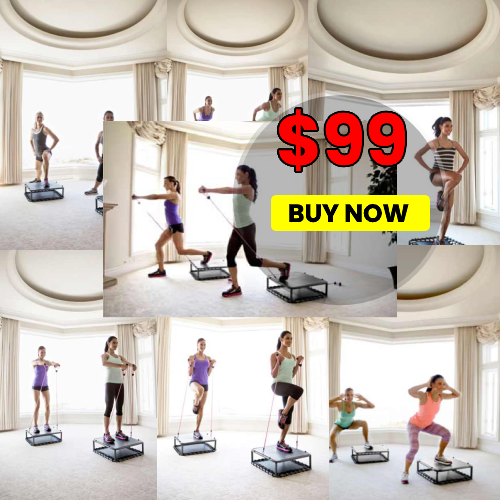
<style>
.page{position:relative;width:500px;height:500px}
.page>*{position:absolute;margin:0}
.t1{font:70px "Poppins-Bold";color:#ff0000}
.t2{font:25px "Poppins-Bold";color:#000000}
</style>
<div class="page">
<p class="t1" style="left:279px;top:109px;width:126px;height:63px">$99</p>
<p class="t2" style="left:289px;top:204px;width:120px;height:19px">BUY NOW</p>
</div>
